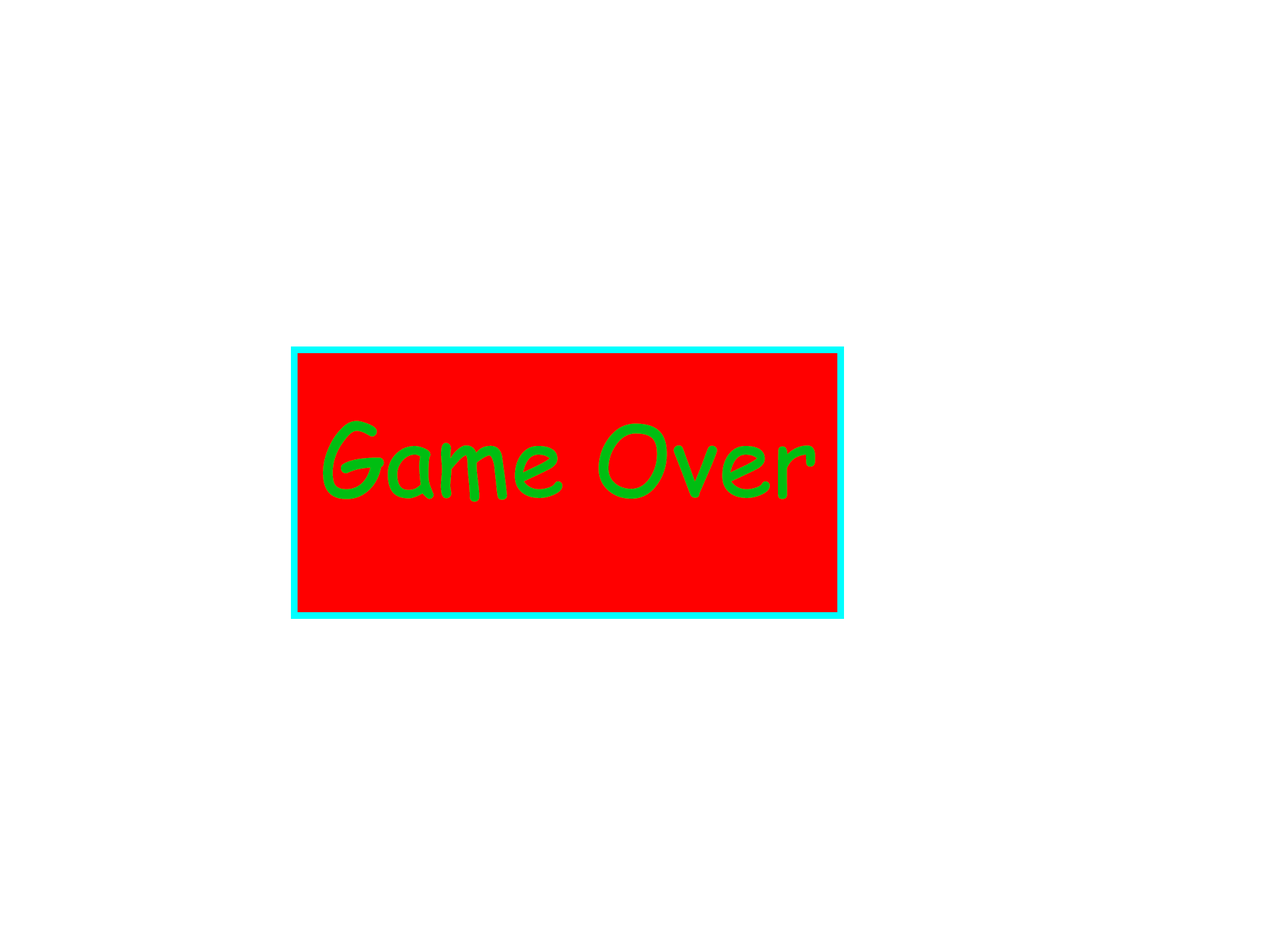
<style>
.page{position:relative;width:1261px;height:946px;background:#ffffff}
.page>*{position:absolute;margin:0}
.t1{font:97.3px "ComicSansMS";color:#00be12}
</style>
<div class="page">
<p class="t1" style="left:323px;top:420px;width:492px;height:82px">Game Over</p>
</div>
